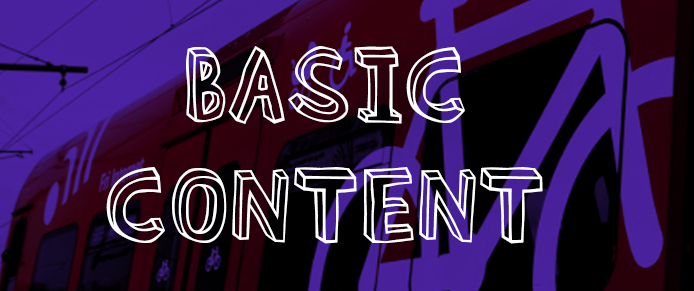
<style>
.page{position:relative;width:694px;height:291px}
.page>*{position:absolute;margin:0}
.t1{font:100px "BlockheadOT-Plain";color:#ffffff}
</style>
<div class="page">
<p class="t1" style="left:106px;top:46px;width:437px;height:198px;text-align:center">BASIC<br>CONTENT</p>
</div>
